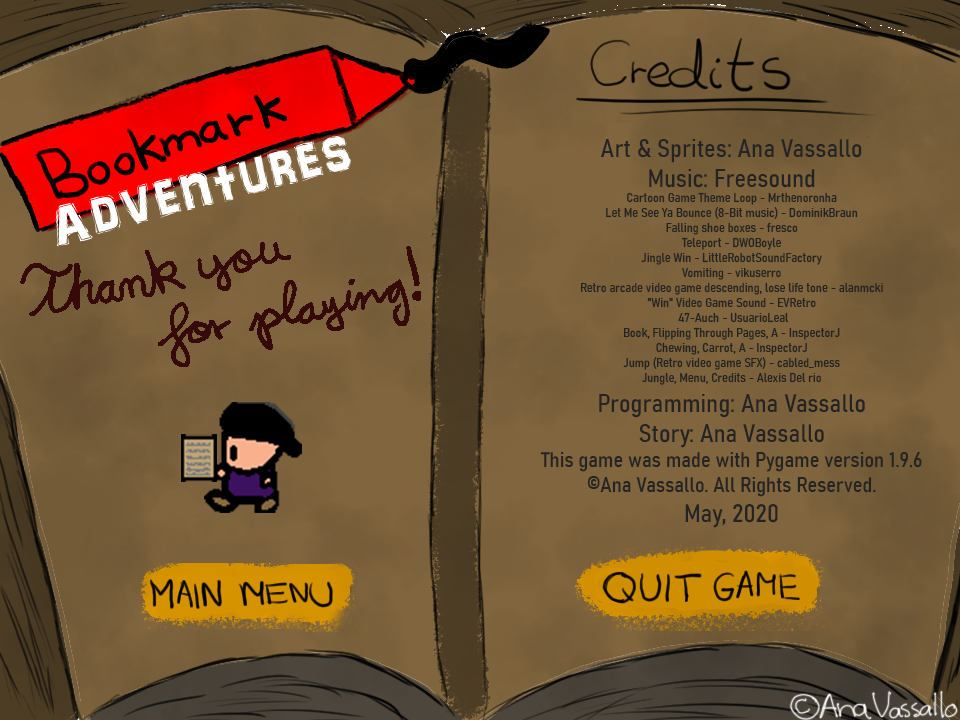
<style>
.page{position:relative;width:960px;height:720px}
.page>*{position:absolute;margin:0}
.t1{font:12.5px "Bahnschrift-SemiCondensed";color:#242424}
.t2{font:25px "Bahnschrift-SemiCondensed";color:#242424}
.t3{font:20.8px "Bahnschrift-SemiCondensed";color:#242424}
</style>
<div class="page">
<p class="t1" style="left:540px;top:139px;width:382px;height:389px;text-align:center"><span class="t2">Art &amp; Sprites: Ana Vassallo<br>Music: Freesound<br></span>Cartoon Game Theme Loop - Mrthenoronha<br>Let Me See Ya Bounce (8-Bit music) - DominikBraun<br>Falling shoe boxes - fresco<br>Teleport - DWOBoyle<br>Jingle Win - LittleRobotSoundFactory<br>Vomiting - vikuserro<br>Retro arcade video game descending, lose life tone - alanmcki<br>"Win" Video Game Sound - EVRetro<br> 47-Auch - UsuarioLeal<br>Book, Flipping Through Pages, A - InspectorJ<br>Chewing, Carrot, A - InspectorJ<br>Jump (Retro video game SFX) - cabled_mess<br>Jungle, Menu, Credits - Alexis Del rio<br><span class="t2">Programming: Ana Vassallo<br>Story: Ana Vassallo<br></span><span class="t3">This game was made with Pygame version 1.9.6<br>©Ana Vassallo. All Rights Reserved.<br></span><span class="t2">May, 2020<br><br><br>© Ana Vassallo</span></p>
</div>
